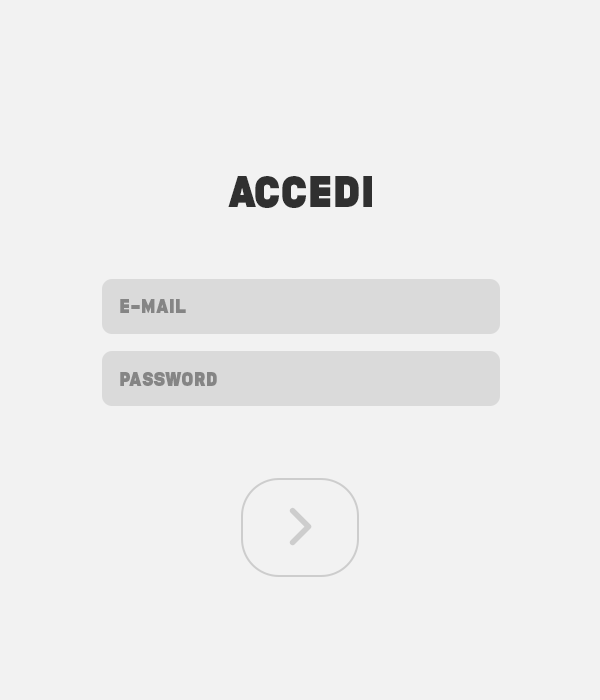
<style>
.page{position:relative;width:600px;height:700px;background:#f2f2f2}
.page>*{position:absolute;margin:0}
.t1{font:43.8px "MEDIOVINTAGE-Regular";color:#303030}
.t2{font:19.4px "MEDIOVINTAGE-Regular";color:#858585}
</style>
<div class="page">
<p class="t1" style="left:228px;top:176px;width:144px;height:32px">ACCEDI</p>
<p class="t2" style="left:120px;top:299px;width:66px;height:14px">E-MAIL</p>
<p class="t2" style="left:120px;top:372px;width:97px;height:14px">password</p>
</div>
